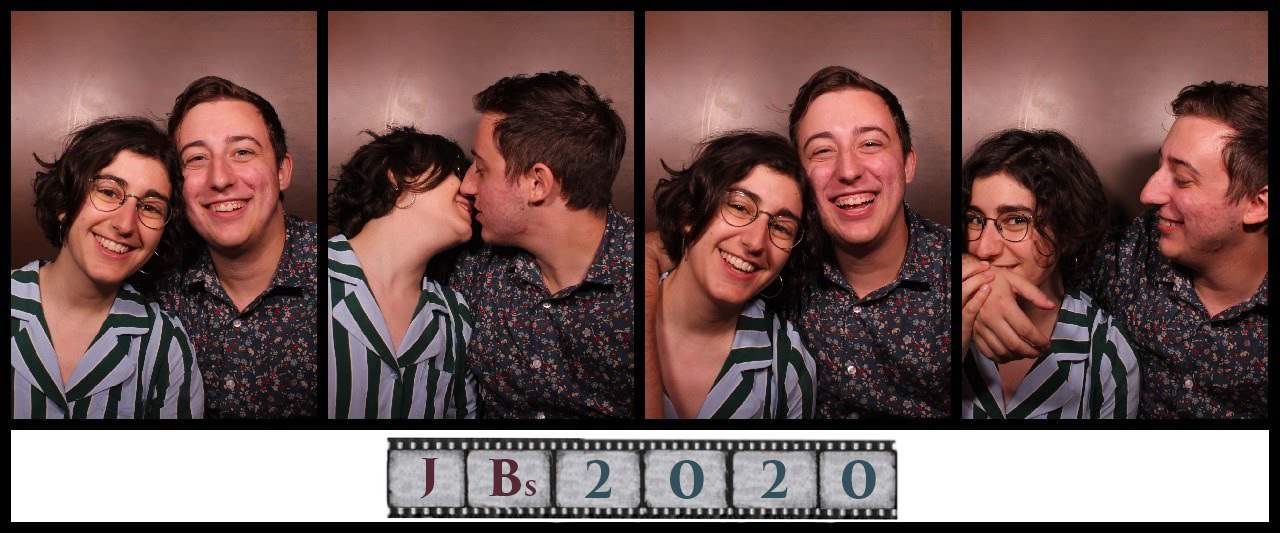
<style>
.page{position:relative;width:1280px;height:533px}
.page>*{position:absolute;margin:0}
.t1{font:46.7px "TrajanPro3-Bold";color:#542835;scale:1.05 1}
.t2{font:49.4px "TrajanPro3-Bold";color:#542835}
.t3{font:24.7px "TrajanPro3-Bold";color:#542835}
.t4{font:49.2px "TrajanPro3-Bold";color:#34505c;scale:0.93 1}
.t5{font:49.4px "TrajanPro3-Bold";color:#34505c;scale:1.11 1}
</style>
<div class="page">
<p class="t1" style="left:420px;top:458px;width:19px;height:41px">j</p>
<p class="t2" style="left:488px;top:459px;width:48px;height:38px">B<span class="t3">s</span></p>
<p class="t4" style="left:585px;top:460px;width:27px;height:38px">2</p>
<p class="t5" style="left:670px;top:460px;width:34px;height:39px">0</p>
<p class="t4" style="left:761px;top:460px;width:27px;height:38px">2</p>
<p class="t5" style="left:842px;top:460px;width:34px;height:39px">0</p>
</div>
